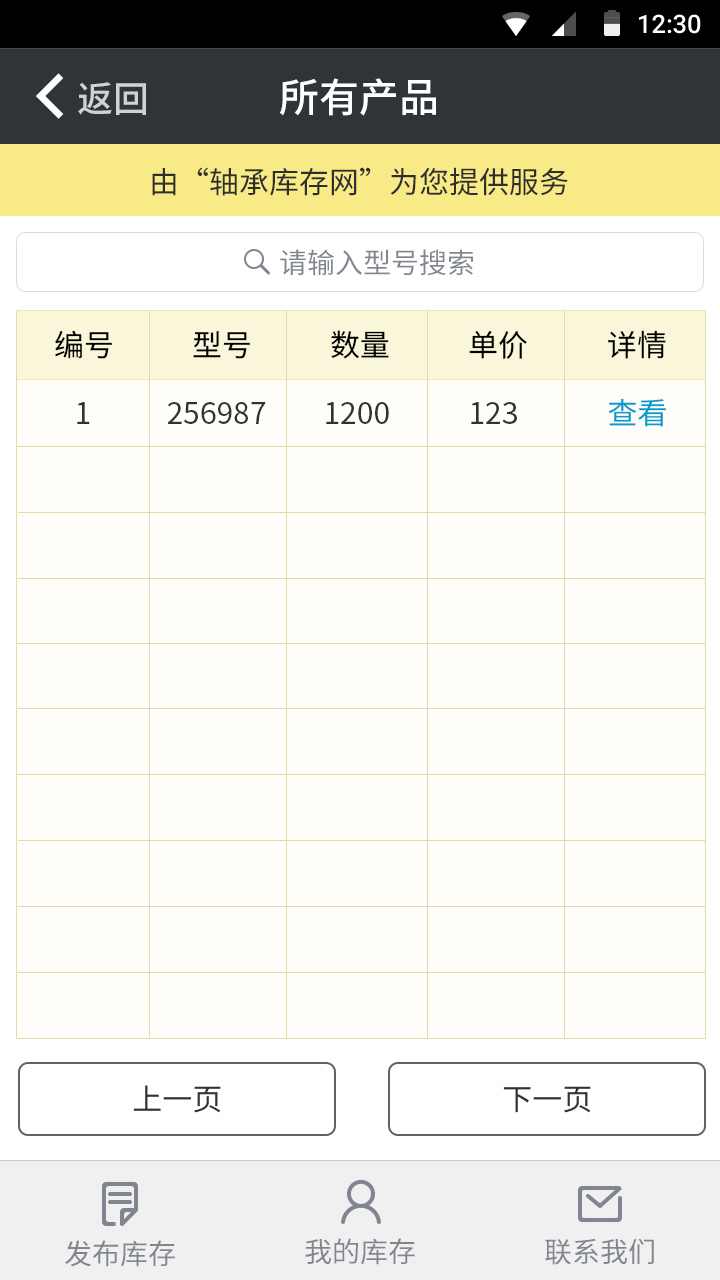
<style>
.page{position:relative;width:720px;height:1280px;background:#fefdf9}
.page>*{position:absolute;margin:0}
.t1{font:25.4px "Roboto-Medium";color:#ffffff}
.t2{font:40px "SourceHanSansCN-Medium";color:#ffffff}
.t3{font:36px "SourceHanSansCN-Medium";color:#d0d1d1}
.t4{font:30px "SourceHanSansCN-Regular";color:#2e2e2e}
.t5{font:28px "SourceHanSansCN-Regular";color:#80858f}
.t6{font:30px "SourceHanSansCN-Regular";color:#000000}
.t7{font:30px "SourceHanSansCN-Regular";color:#029ccf}
.t8{font:30px "SourceHanSansCN-Regular";color:#323232}
</style>
<div class="page">
<p class="t1" style="left:639px;top:14px;width:62px;height:20px">12:30</p>
<p class="t2" style="left:280px;top:78px;width:156px;height:38px">所有产品</p>
<p class="t3" style="left:78px;top:82px;width:68px;height:33px">返回</p>
<p class="t4" style="left:152px;top:167px;width:416px;height:29px">由“轴承库存网”为您提供服务</p>
<p class="t5" style="left:280px;top:249px;width:193px;height:27px">请输入型号搜索</p>
<p class="t6" style="left:55px;top:330px;width:57px;height:29px">编号</p>
<p class="t6" style="left:193px;top:331px;width:57px;height:28px">型号</p>
<p class="t6" style="left:331px;top:330px;width:58px;height:29px">数量</p>
<p class="t6" style="left:469px;top:330px;width:58px;height:29px">单价</p>
<p class="t6" style="left:608px;top:330px;width:58px;height:29px">详情</p>
<p class="t7" style="left:608px;top:398px;width:58px;height:29px">查看</p>
<p class="t8" style="left:77px;top:402px;width:13px;height:22px">1</p>
<p class="t8" style="left:167px;top:402px;width:99px;height:22px">256987</p>
<p class="t8" style="left:326px;top:402px;width:63px;height:22px">1200</p>
<p class="t8" style="left:471px;top:402px;width:46px;height:22px">123</p>
<p class="t8" style="left:133px;top:1085px;width:88px;height:28px">上一页</p>
<p class="t8" style="left:503px;top:1086px;width:88px;height:27px">下一页</p>
<p class="t5" style="left:65px;top:1240px;width:110px;height:27px">发布库存</p>
<p class="t5" style="left:305px;top:1238px;width:110px;height:27px">我的库存</p>
<p class="t5" style="left:545px;top:1238px;width:109px;height:27px">联系我们</p>
</div>
